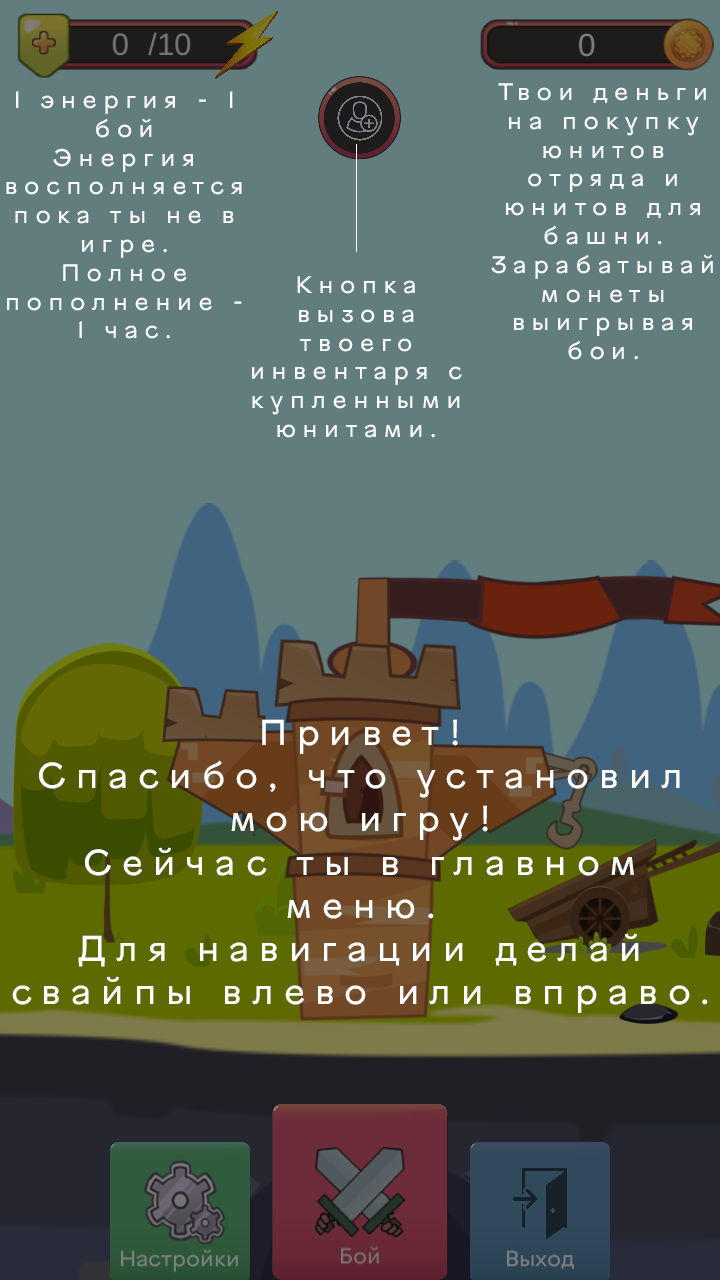
<style>
.page{position:relative;width:720px;height:1280px;background:#617d7e}
.page>*{position:absolute;margin:0}
.t1{font:24px "VinnytsiaSansReg";letter-spacing:0.28em;color:#ffffff}
.t2{font:36px "VinnytsiaSansReg";letter-spacing:0.28em;color:#ffffff}
</style>
<div class="page">
<p class="t1" style="left:491px;top:83px;width:222px;height:277px;text-align:center">Твои деньги на покупку юнитов отряда и юнитов для башни. <br>Зарабатывай монеты выигрывая бои.</p>
<p class="t1" style="left:6px;top:91px;width:236px;height:248px;text-align:center">1 энергия - 1 бой<br>Энергия восполняется пока ты не в игре.<br>Полное пополнение - 1 час.</p>
<p class="t1" style="left:252px;top:276px;width:210px;height:162px;text-align:center">Кнопка вызова твоего инвентаря с купленными юнитами.</p>
<p class="t2" style="left:12px;top:719px;width:696px;height:294px;text-align:center">Привет!<br>Спасибо, что установил мою игру!<br>Сейчас ты в главном меню.<br>Для навигации делай свайпы влево или вправо.</p>
</div>
